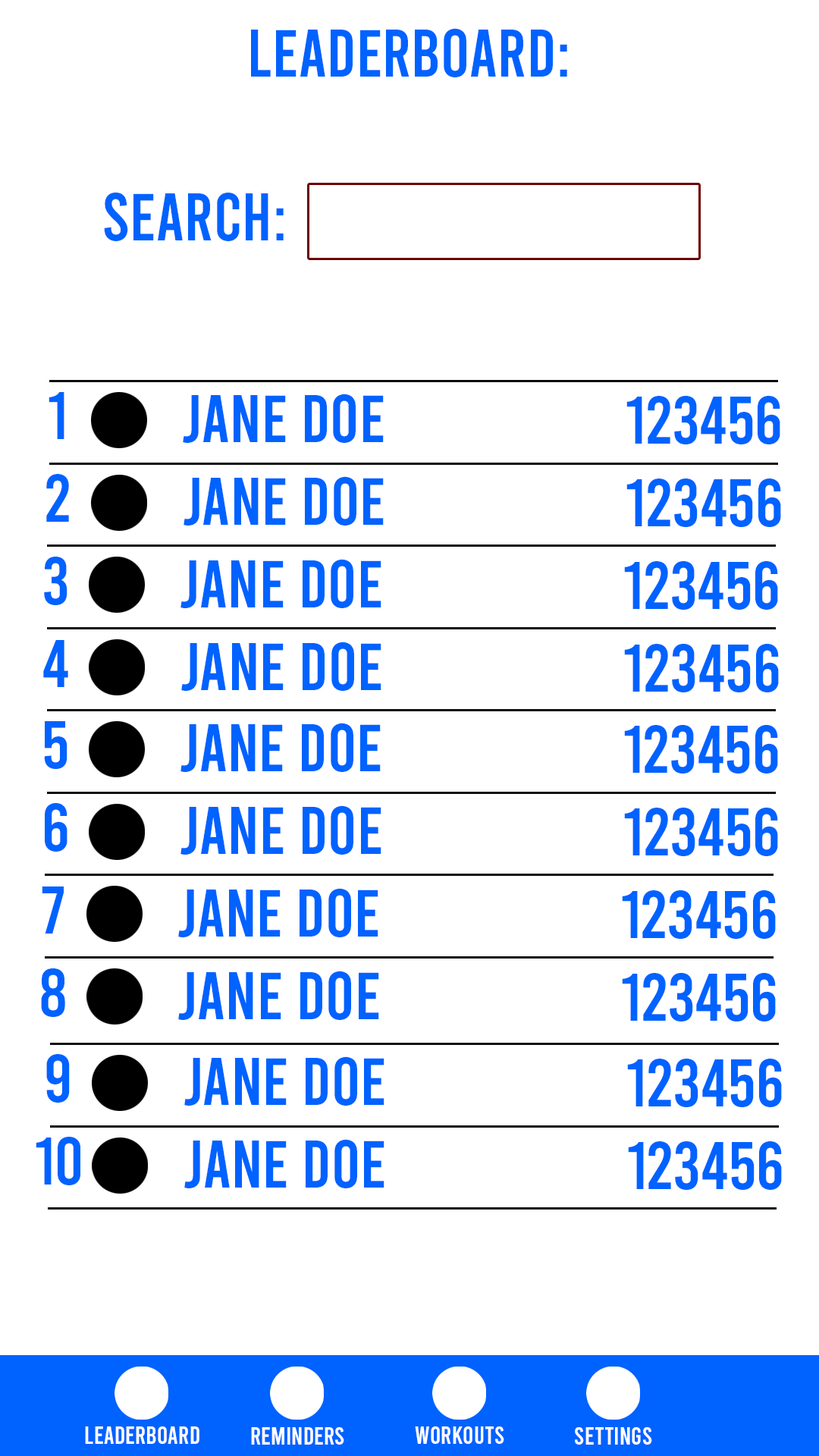
<style>
.page{position:relative;width:819px;height:1456px;background:#ffffff}
.page>*{position:absolute;margin:0}
.t1{font:66.7px "Bebas-Regular";color:#0062ff}
.t2{font:25px "Bebas-Regular";color:#ffffff}
</style>
<div class="page">
<p class="t1" style="left:251px;top:28px;width:316px;height:49px">Leaderboard:</p>
<p class="t1" style="left:104px;top:192px;width:180px;height:49px">Search:</p>
<p class="t1" style="left:49px;top:392px;width:15px;height:47px">1</p>
<p class="t1" style="left:183px;top:394px;width:201px;height:49px">Jane doe</p>
<p class="t1" style="left:626px;top:396px;width:154px;height:48px">123456</p>
<p class="t1" style="left:46px;top:474px;width:23px;height:48px">2</p>
<p class="t1" style="left:184px;top:476px;width:200px;height:50px">Jane doe</p>
<p class="t1" style="left:626px;top:479px;width:155px;height:48px">123456</p>
<p class="t1" style="left:44px;top:557px;width:23px;height:48px">3</p>
<p class="t1" style="left:180px;top:559px;width:201px;height:49px">Jane doe</p>
<p class="t1" style="left:624px;top:561px;width:154px;height:49px">123456</p>
<p class="t1" style="left:43px;top:640px;width:25px;height:47px">4</p>
<p class="t1" style="left:181px;top:642px;width:200px;height:49px">Jane doe</p>
<p class="t1" style="left:624px;top:644px;width:155px;height:48px">123456</p>
<p class="t1" style="left:44px;top:721px;width:23px;height:48px">5</p>
<p class="t1" style="left:180px;top:723px;width:201px;height:49px">Jane doe</p>
<p class="t1" style="left:624px;top:725px;width:154px;height:48px">123456</p>
<p class="t1" style="left:45px;top:803px;width:22px;height:49px">6</p>
<p class="t1" style="left:180px;top:805px;width:201px;height:50px">Jane doe</p>
<p class="t1" style="left:624px;top:808px;width:154px;height:48px">123456</p>
<p class="t1" style="left:42px;top:886px;width:22px;height:47px">7</p>
<p class="t1" style="left:178px;top:888px;width:200px;height:49px">Jane doe</p>
<p class="t1" style="left:622px;top:890px;width:154px;height:49px">123456</p>
<p class="t1" style="left:41px;top:968px;width:24px;height:49px">8</p>
<p class="t1" style="left:178px;top:971px;width:201px;height:49px">Jane doe</p>
<p class="t1" style="left:622px;top:973px;width:154px;height:48px">123456</p>
<p class="t1" style="left:46px;top:1054px;width:24px;height:49px">9</p>
<p class="t1" style="left:184px;top:1056px;width:200px;height:50px">Jane doe</p>
<p class="t1" style="left:627px;top:1059px;width:155px;height:48px">123456</p>
<p class="t1" style="left:36px;top:1137px;width:44px;height:48px">10</p>
<p class="t1" style="left:184px;top:1139px;width:200px;height:49px">Jane doe</p>
<p class="t1" style="left:628px;top:1141px;width:154px;height:49px">123456</p>
<p class="t2" style="left:85px;top:1426px;width:114px;height:18px">Leaderboard</p>
<p class="t2" style="left:251px;top:1427px;width:93px;height:18px">Reminders</p>
<p class="t2" style="left:415px;top:1426px;width:89px;height:18px">Workouts</p>
<p class="t2" style="left:575px;top:1427px;width:77px;height:18px">Settings</p>
</div>
